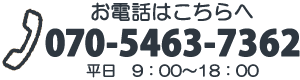
<style>
.page{position:relative;width:300px;height:80px;background:#ffffff}
.page>*{position:absolute;margin:0}
.t1{font:20px "HGMaruGothicMPRO";color:#2e3740;font-weight:bold}
.t2{font:35px "KozGoPr6N-Heavy";color:#2e3740;font-weight:bold}
.t3{font:15px "HGMaruGothicMPRO";color:#2e3740;font-weight:bold}
</style>
<div class="page">
<p class="t1" style="left:91px;top:2px;width:162px;height:19px">お電話はこちらへ</p>
<p class="t2" style="left:45px;top:28px;width:255px;height:29px">070-5463-7362</p>
<p class="t3" style="left:86px;top:64px;width:173px;height:14px">平日　9：00～18：00</p>
</div>
